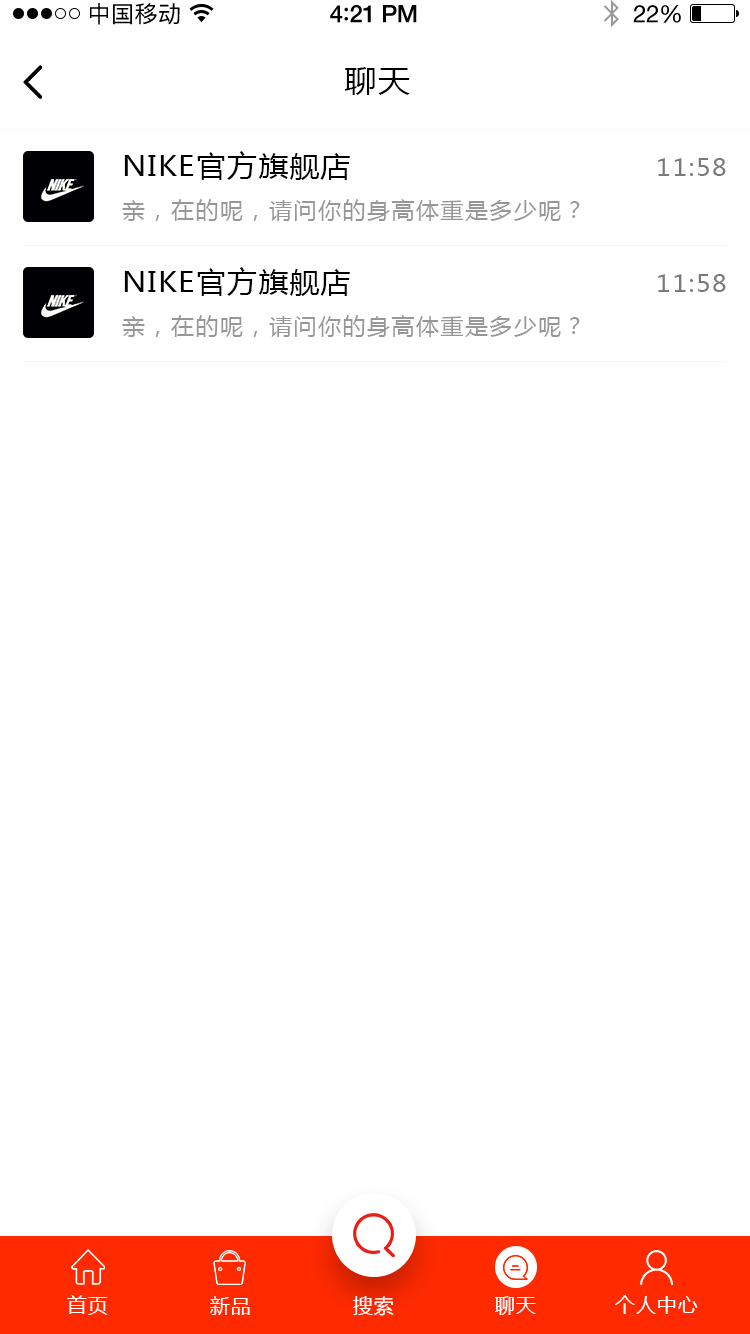
<style>
.page{position:relative;width:750px;height:1334px;background:#ffffff}
.page>*{position:absolute;margin:0}
.t1{font:23px "PingFangSC-Regular";letter-spacing:0.02em;color:#000000}
.t2{font:24px "HelveticaNeue-Medium";letter-spacing:-0.02em;color:#000000}
.t3{font:26px "Avenir-Medium";letter-spacing:-0.02em;color:#000000}
.t4{font:24px "HelveticaNeue";letter-spacing:-0.02em;color:#000000}
.t5{font:30px "MicrosoftYaHei";letter-spacing:0.05em;color:#000000;scale:1.06 1}
.t6{font:28px "MicrosoftYaHei";letter-spacing:0.05em;color:#000000;scale:1.06 1}
.t7{font:24px "MicrosoftYaHei";letter-spacing:0.05em;color:#7a7a7a;scale:1.06 1}
.t8{font:22px "MicrosoftYaHei";letter-spacing:0.05em;color:#979797;scale:1.06 1}
.t9{font:20px "MicrosoftYaHei";letter-spacing:0.05em;color:#ffffff;text-transform:uppercase}
</style>
<div class="page">
<p class="t1" style="left:90px;top:3px;width:90px;height:22px">中国移动</p>
<p class="t2" style="left:330px;top:5px;width:87px;height:18px">4<span class="t3">:</span>21 PM</p>
<p class="t4" style="left:633px;top:5px;width:48px;height:18px">22%</p>
<p class="t5" style="left:344px;top:67px;width:66px;height:28px">聊天</p>
<p class="t6" style="left:124px;top:151px;width:226px;height:29px">NIKE官方旗舰店</p>
<p class="t7" style="left:658px;top:158px;width:68px;height:18px">11:58</p>
<p class="t8" style="left:122px;top:199px;width:458px;height:22px">亲，在的呢，请问你的身高体重是多少呢？</p>
<p class="t6" style="left:124px;top:267px;width:226px;height:29px">NIKE官方旗舰店</p>
<p class="t7" style="left:658px;top:274px;width:68px;height:18px">11:58</p>
<p class="t8" style="left:122px;top:315px;width:458px;height:22px">亲，在的呢，请问你的身高体重是多少呢？</p>
<p class="t9" style="left:67px;top:1295px;width:41px;height:20px">首页</p>
<p class="t9" style="left:210px;top:1296px;width:40px;height:19px">新品</p>
<p class="t9" style="left:353px;top:1296px;width:41px;height:20px">搜索</p>
<p class="t9" style="left:494px;top:1296px;width:42px;height:19px">聊天</p>
<p class="t9" style="left:615px;top:1295px;width:83px;height:19px">个人中心</p>
</div>
